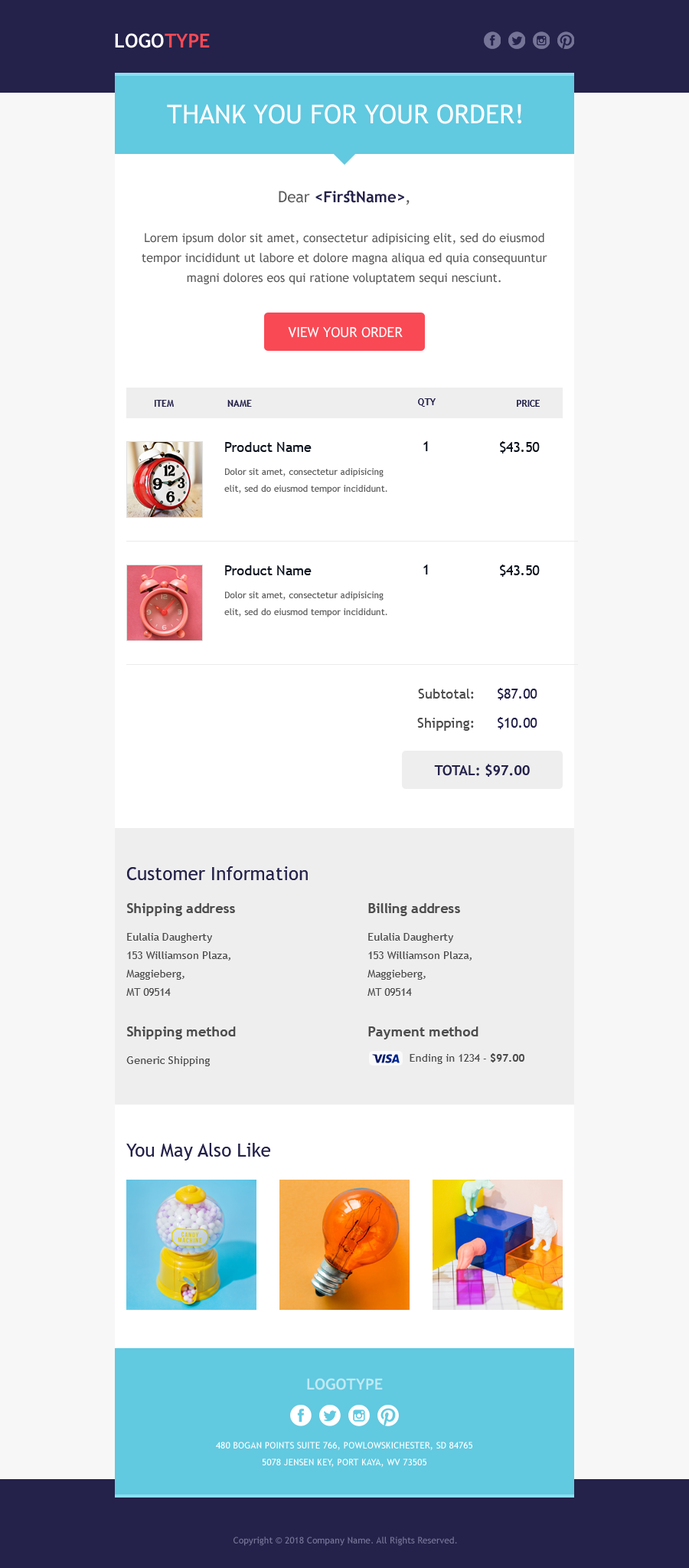
<style>
.page{position:relative;width:689px;height:1568px;background:#ffffff}
.page>*{position:absolute;margin:0}
.t1{font:19.1px "TrebuchetMS-Bold";color:#ffffff;text-transform:uppercase}
.t2{font:19.1px "TrebuchetMS-Bold";color:#f94955;text-transform:uppercase}
.t3{font:26px "TrebuchetMS";color:#ffffff;text-transform:uppercase}
.t4{font:12.3px/19.9px "TrebuchetMS";color:#5a5a5a}
.t5{font:15.3px/19.9px "TrebuchetMS";color:#5a5a5a}
.t6{font:15.3px/19.9px "TrebuchetMS-Bold";color:#24224a}
.t7{font:13.8px "TrebuchetMS";color:#ffffff;text-transform:uppercase}
.t8{font:9.2px "TrebuchetMS-Bold";letter-spacing:0.005em;color:#24224a;text-transform:uppercase}
.t9{font:13.8px "TrebuchetMS";letter-spacing:0.005em;color:#0d141f}
.t10{font:9.2px/16.9px "TrebuchetMS";color:#5a5a5a}
.t11{font:13.8px/29.1px "TrebuchetMS";letter-spacing:0.005em;color:#4e4d4d}
.t12{font:13.8px/29.1px "TrebuchetMS";letter-spacing:0.005em;color:#24224a}
.t13{font:13.8px "TrebuchetMS-Bold";color:#24224a;text-transform:uppercase}
.t14{font:18.4px "TrebuchetMS";letter-spacing:0.005em;color:#24224a}
.t15{font:10.7px/18.4px "TrebuchetMS";letter-spacing:0.005em;color:#4e4d4d}
.t16{font:13.8px/16.9px "TrebuchetMS-Bold";letter-spacing:0.005em;color:#4e4d4d}
.t17{font:10.7px/10.7px "TrebuchetMS";letter-spacing:0.005em;color:#4e4d4d}
.t18{font:13.8px "TrebuchetMS-Bold";letter-spacing:0.005em;color:#4e4d4d}
.t19{font:10.7px "TrebuchetMS";letter-spacing:0.005em;color:#4e4d4d}
.t20{font:10.7px "TrebuchetMS-Bold";letter-spacing:0.005em;color:#4e4d4d}
.t21{font:15.3px "TrebuchetMS-Bold";color:#c0e9f3;text-transform:uppercase}
.t22{font:9.2px/16.9px "TrebuchetMS";color:#ffffff;text-transform:uppercase}
.t23{font:9.2px "TrebuchetMS";color:#767496}
</style>
<div class="page">
<p class="t1" style="left:115px;top:33px;width:95px;height:15px">Logo<span class="t2">type</span></p>
<p class="t3" style="left:167px;top:104px;width:355px;height:20px">Thank you for your order!</p>
<p class="t4" style="left:142px;top:190px;width:406px;height:95px;text-align:center"><span class="t5">Dear </span><span class="t6">&lt;FirstName&gt;</span><span class="t5">,<br></span><br>Lorem ipsum dolor sit amet, consectetur adipisicing elit, sed do eiusmod tempor incididunt ut labore et dolore magna aliqua ed quia consequuntur magni dolores eos qui ratione voluptatem sequi nesciunt.</p>
<p class="t7" style="left:288px;top:327px;width:115px;height:11px">view your order</p>
<p class="t8" style="left:155px;top:400px;width:19px;height:7px">Item</p>
<p class="t8" style="left:228px;top:400px;width:24px;height:7px">name</p>
<p class="t8" style="left:418px;top:398px;width:18px;height:9px">qty</p>
<p class="t8" style="left:517px;top:400px;width:23px;height:7px">price</p>
<p class="t9" style="left:225px;top:442px;width:87px;height:10px">Product Name</p>
<p class="t9" style="left:424px;top:441px;width:4px;height:10px">1</p>
<p class="t9" style="left:500px;top:441px;width:40px;height:12px">$43.50</p>
<p class="t10" style="left:224px;top:468px;width:164px;height:26px">Dolor sit amet, consectetur adipisicing elit, sed do eiusmod tempor incididunt.</p>
<p class="t9" style="left:225px;top:565px;width:87px;height:10px">Product Name</p>
<p class="t9" style="left:424px;top:565px;width:4px;height:9px">1</p>
<p class="t9" style="left:500px;top:565px;width:40px;height:12px">$43.50</p>
<p class="t10" style="left:224px;top:591px;width:164px;height:26px">Dolor sit amet, consectetur adipisicing elit, sed do eiusmod tempor incididunt.</p>
<p class="t11" style="left:417px;top:689px;width:57px;height:42px;text-align:right">Subtotal:<br>Shipping:</p>
<p class="t12" style="left:498px;top:688px;width:40px;height:41px">$87.00<br>$10.00</p>
<p class="t13" style="left:434px;top:764px;width:96px;height:13px">Total: $97.00</p>
<p class="t14" style="left:127px;top:866px;width:181px;height:14px">Customer Information</p>
<p class="t15" style="left:126px;top:903px;width:109px;height:93px"><span class="t16">Shipping address<br><br></span><span class="t17">Eulalia Daugherty<br></span>153 Williamson Plaza, <br>Maggieberg, <br>MT 09514</p>
<p class="t15" style="left:368px;top:903px;width:104px;height:93px"><span class="t16">Billing address<br><br></span><span class="t17">Eulalia Daugherty<br></span>153 Williamson Plaza, <br>Maggieberg, <br>MT 09514</p>
<p class="t17" style="left:126px;top:1026px;width:110px;height:40px"><span class="t16">Shipping method<br><br></span>Generic Shipping</p>
<p class="t18" style="left:368px;top:1026px;width:111px;height:13px">Payment method</p>
<p class="t19" style="left:410px;top:1053px;width:115px;height:11px">Ending in 1234 - <span class="t20">$97.00</span></p>
<p class="t14" style="left:126px;top:1143px;width:144px;height:17px">You May Also Like</p>
<p class="t21" style="left:307px;top:1378px;width:76px;height:12px">Logotype</p>
<p class="t22" style="left:216px;top:1442px;width:257px;height:26px;text-align:center">480 Bogan Points Suite 766, Powlowskichester, SD 84765<br>5078 Jensen Key, Port Kaya, WV 73505</p>
<p class="t23" style="left:234px;top:1537px;width:223px;height:9px">Copyright © 2018 Company Name. All Rights Reserved.</p>
</div>
